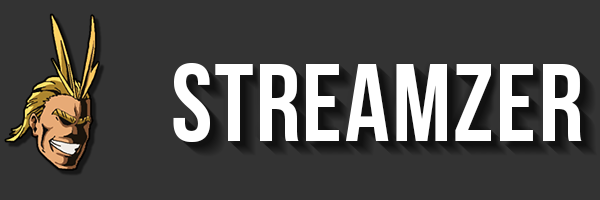
<style>
.page{position:relative;width:600px;height:200px;background:#333333}
.page>*{position:absolute;margin:0}
.t1{font:110px "BebasNeue";letter-spacing:0.02em;color:#ffffff}
</style>
<div class="page">
<p class="t1" style="left:173px;top:63px;width:409px;height:79px">STREAMZER</p>
</div>
